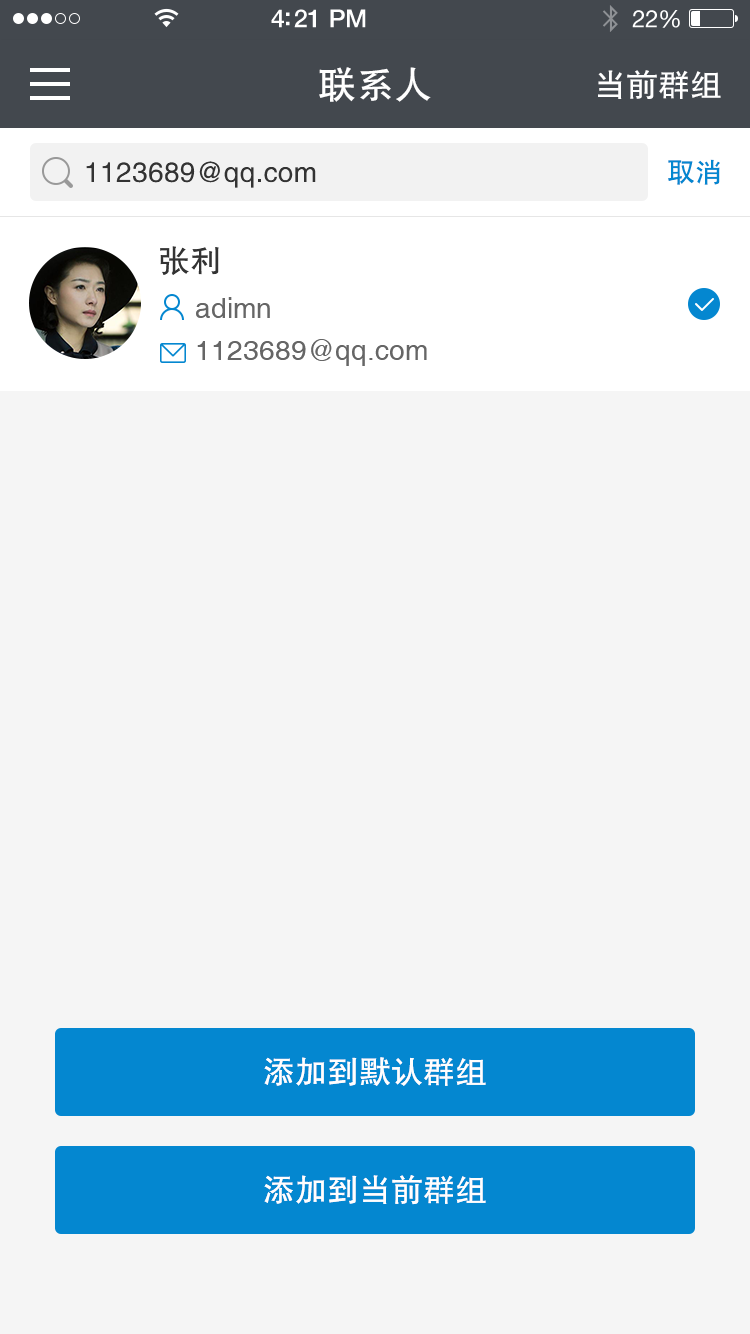
<style>
.page{position:relative;width:750px;height:1334px;background:#f5f5f5}
.page>*{position:absolute;margin:0}
.t1{font:38px "FZHTJW--GB1-0";color:#ffffff}
.t2{font:32px "FZHTJW--GB1-0";color:#ffffff}
.t3{font:28px "FZHTJW--GB1-0";color:#333333}
.t4{font:28px "FZHTJW--GB1-0";color:#0487d0}
.t5{font:32px "FZHTJW--GB1-0";color:#333333}
.t6{font:28px "Helvetica";color:#666666}
.t7{font:32px "FZHTJW--GB1-0";color:#fffefe}
</style>
<div class="page">
<p class="t1" style="left:319px;top:67px;width:112px;height:35px">联系人</p>
<p class="t2" style="left:598px;top:70px;width:123px;height:29px">当前群组</p>
<p class="t3" style="left:86px;top:161px;width:230px;height:27px">1123689@qq.com</p>
<p class="t4" style="left:668px;top:159px;width:52px;height:26px">取消</p>
<p class="t5" style="left:160px;top:246px;width:59px;height:29px">张利</p>
<p class="t6" style="left:196px;top:297px;width:74px;height:21px">adimn</p>
<p class="t6" style="left:197px;top:339px;width:230px;height:27px">1123689@qq.com</p>
<p class="t7" style="left:264px;top:1057px;width:222px;height:29px">添加到默认群组</p>
<p class="t7" style="left:264px;top:1175px;width:222px;height:30px">添加到当前群组</p>
</div>
